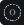
<style>
.page{position:relative;width:24px;height:25px;background:#141719}
.page>*{position:absolute;margin:0}
.t1{font:9.3px "Modern-Regular";color:#898989;text-transform:uppercase}
</style>
<div class="page">
<p class="t1" style="left:9px;top:9px;width:7px;height:7px">O</p>
<p class="t1" style="left:9px;top:9px;width:7px;height:7px">O</p>
</div>
